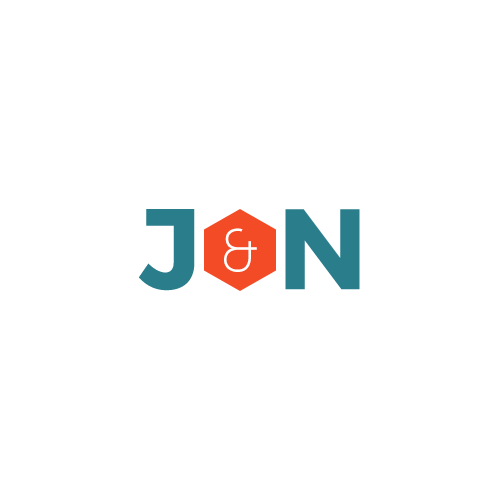
<style>
.page{position:relative;width:500px;height:500px;background:#ffffff}
.page>*{position:absolute;margin:0}
.t1{font:114px "Montserrat-Bold";letter-spacing:-0.155em;color:#2a7e8c}
.t2{font:60px "MuseoSans-100";letter-spacing:-0.155em;color:#fffffb}
</style>
<div class="page">
<p class="t1" style="left:139px;top:209px;width:56px;height:82px">J</p>
<p class="t1" style="left:285px;top:209px;width:75px;height:81px">N</p>
<p class="t2" style="left:224px;top:228px;width:33px;height:44px">&amp;</p>
</div>
